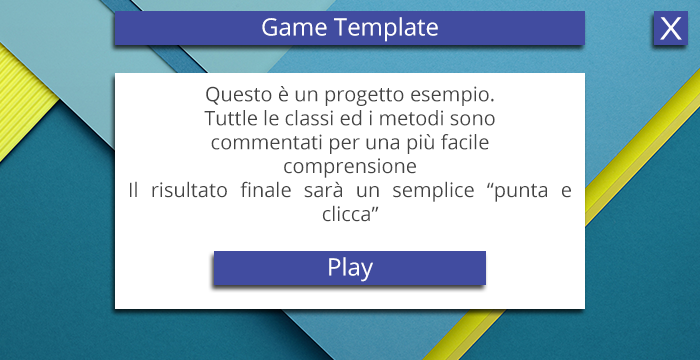
<style>
.page{position:relative;width:700px;height:360px;background:#ffffff}
.page>*{position:absolute;margin:0}
.t1{font:23.9px "OpenSans";color:#ffffff}
.t2{font:31px "OpenSans";color:#ffffff;scale:1.23 1}
.t3{font:20px "OpenSans";color:#444444}
</style>
<div class="page">
<p class="t1" style="left:262px;top:17px;width:176px;height:25px">Game Template</p>
<p class="t2" style="left:660px;top:17px;width:22px;height:23px">X</p>
<p class="t3" style="left:130px;top:86px;width:441px;height:136px;text-align:justify">Questo è un progetto esempio.<br>Tuttle le classi ed i metodi sono <br>commentati per una più facile <br>comprensione<br>Il risultato finale sarà un semplice “punta e clicca”</p>
<p class="t1" style="left:329px;top:257px;width:44px;height:25px">Play</p>
</div>
